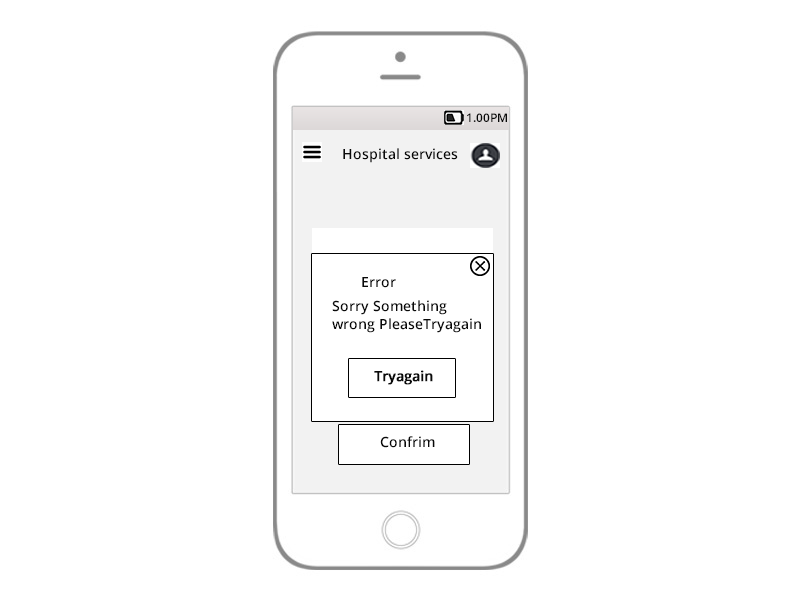
<style>
.page{position:relative;width:800px;height:600px;background:#ffffff}
.page>*{position:absolute;margin:0}
.t1{font:12px "OpenSans-Semibold";color:#090909}
.t2{font:14px "OpenSans-Semibold";color:#090909}
.t3{font:14px/6px "OpenSans-Semibold";color:#090909}
.t4{font:12px/6px "OpenSans-Semibold";color:#090909}
.t5{font:14px "OpenSans-Semibold";color:#090909;font-weight:bold}
</style>
<div class="page">
<p class="t1" style="left:467px;top:113px;width:40px;height:9px"><span class="t2">                                         </span>1.00PM</p>
<p class="t2" style="left:343px;top:148px;width:115px;height:15px">Hospital services</p>
<p class="t3" style="left:332px;top:277px;width:149px;height:56px"><span class="t4"><br> <br><br> <br>       </span>       Error<br> <br><br>      <br>     Sorry Something<br><br><br>     wrong PleaseTryagain</p>
<p class="t5" style="left:374px;top:370px;width:59px;height:15px"><span class="t2"><br><br>  </span>Tryagain</p>
<p class="t2" style="left:380px;top:436px;width:55px;height:12px"><span class="t1"><br>   <br>     </span>Confrim</p>
</div>
